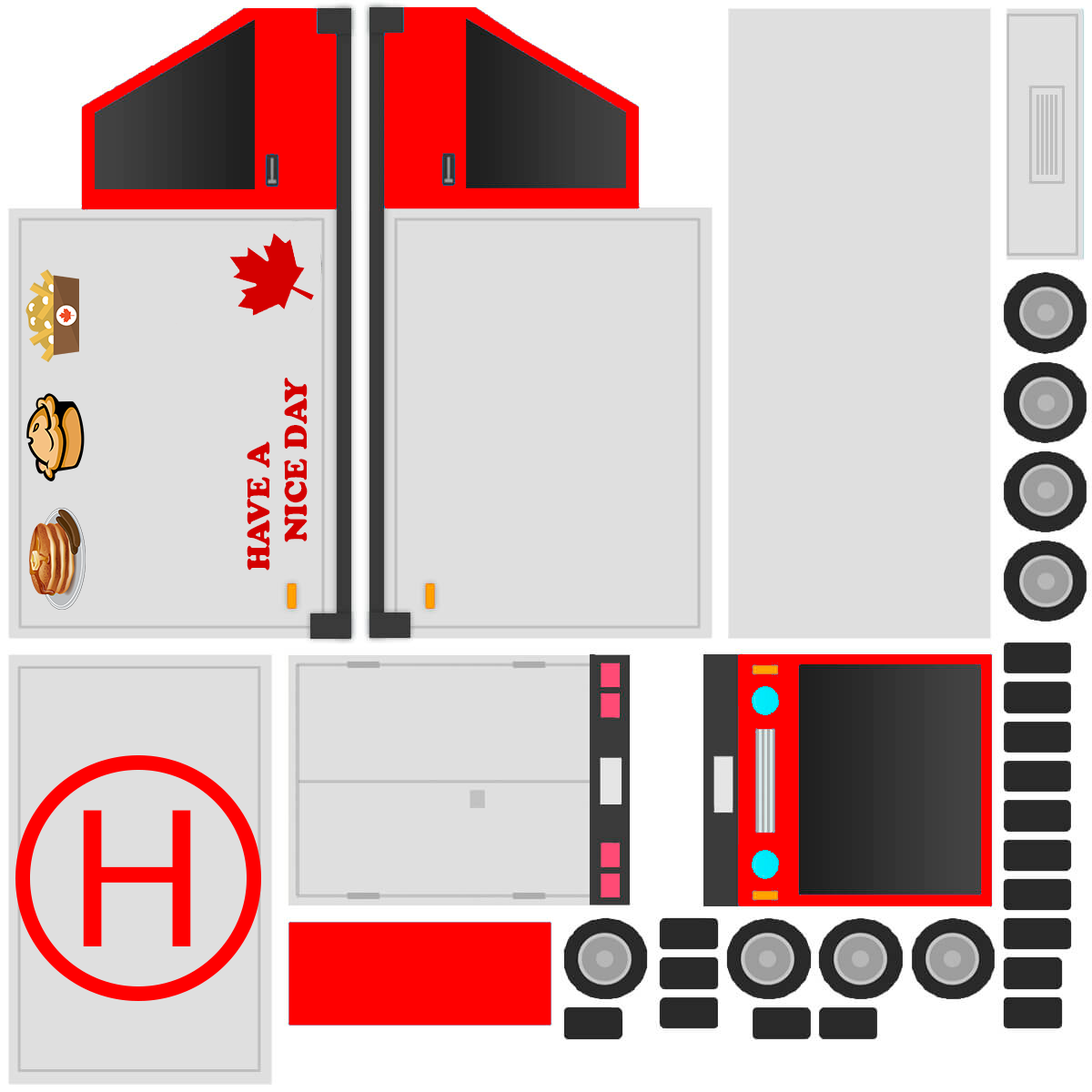
<style>
.page{position:relative;width:1092px;height:1092px;background:#dfdfdf}
.page>*{position:absolute;margin:0}
.t1{font:31.1px "CooperBlackStd";color:#d40000;scale:0.97 1}
</style>
<div class="page">
<p class="t1" style="left:247px;top:378px;width:61px;height:193px;rotate:-90deg">HAVE A              NICE DAY</p>
</div>
